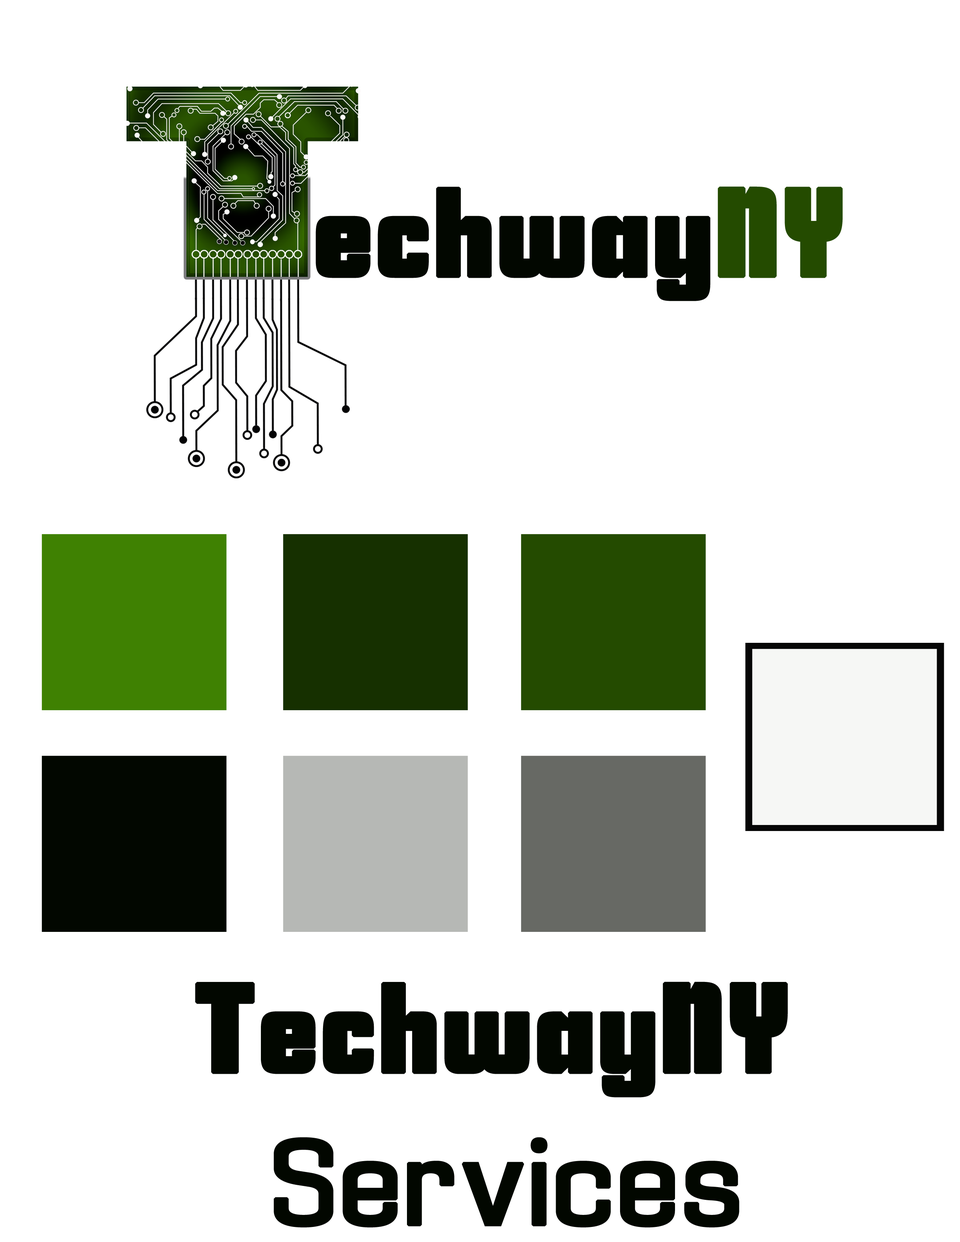
<style>
.page{position:relative;width:960px;height:1242px;background:#ffffff}
.page>*{position:absolute;margin:0}
.t1{font:124.3px "SavingsBond";color:#020700;font-weight:bold}
.t2{font:124.3px "SavingsBond";color:#244b00;font-weight:bold}
.t3{font:125.5px "SavingsBond";color:#020700;font-weight:bold}
.t4{font:112.9px "Enigmatic";color:#020700;font-weight:bold}
</style>
<div class="page">
<p class="t1" style="left:315px;top:186px;width:528px;height:115px">echway<span class="t2">NY</span></p>
<p class="t3" style="left:195px;top:982px;width:593px;height:116px">TechwayNY</p>
<p class="t4" style="left:274px;top:1137px;width:465px;height:91px">Services</p>
</div>
